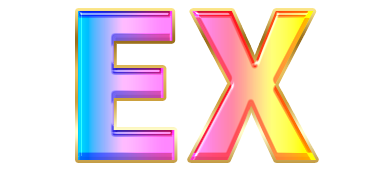
<style>
.page{position:relative;width:379px;height:188px;background:#ffffff}
.page>*{position:absolute;margin:0}
.t1{font:200px "SourceHanSans-Heavy"}
</style>
<div class="page">
<p class="t1" style="left:78px;top:11px;width:238px;height:149px">EX</p>
</div>
